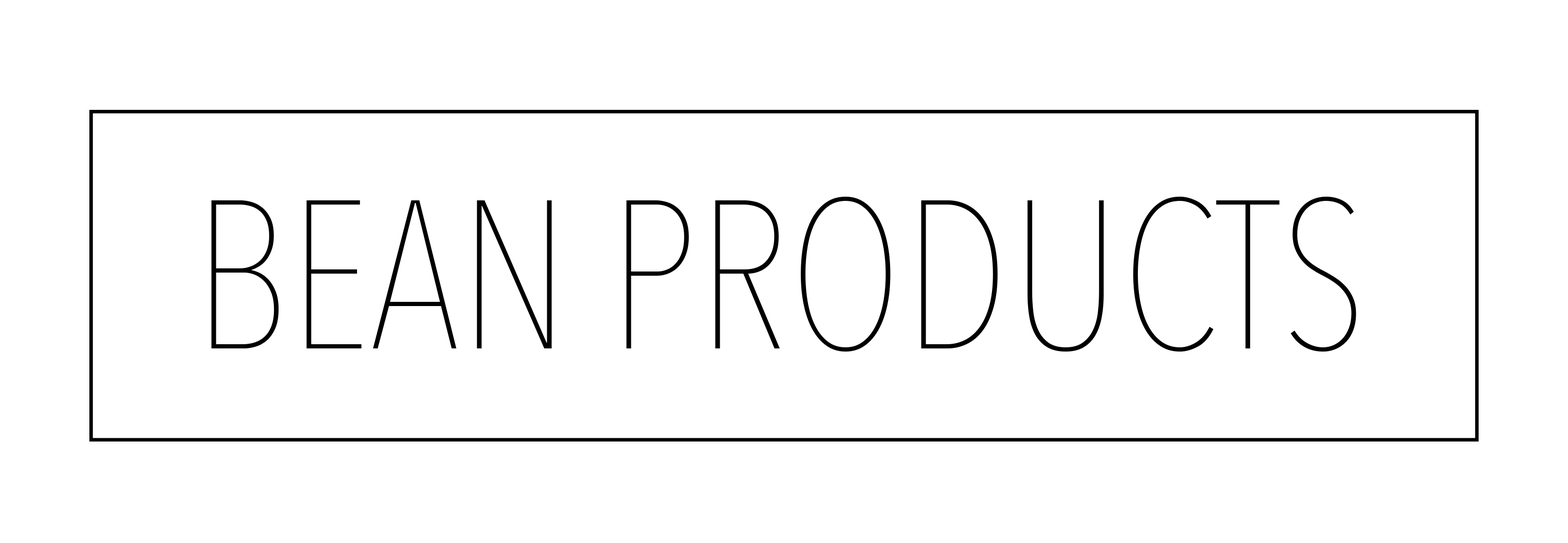
<style>
.page{position:relative;width:1568px;height:543px;background:#ffffff}
.page>*{position:absolute;margin:0}
.t1{font:209.1px "AvenirNextCondensed-UltraLight";color:#000000;text-transform:uppercase}
</style>
<div class="page">
<p class="t1" style="left:211px;top:197px;width:1145px;height:154px">bean products</p>
</div>
